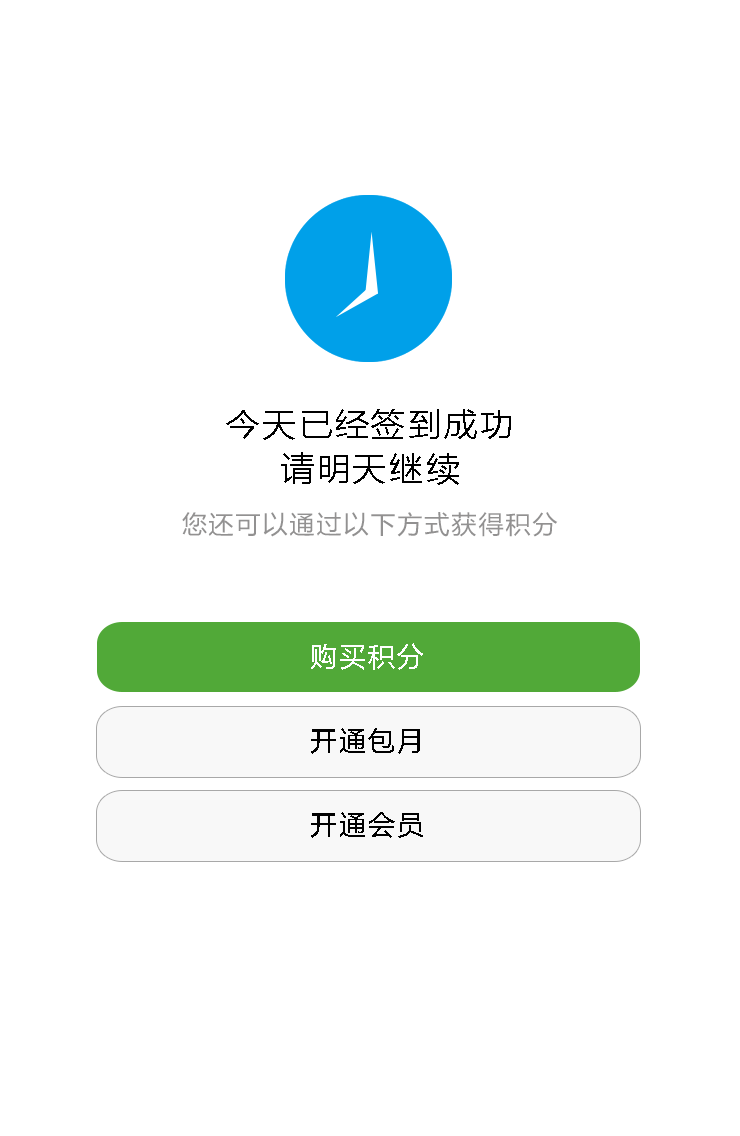
<style>
.page{position:relative;width:740px;height:1136px;background:#ffffff}
.page>*{position:absolute;margin:0}
.t1{font:33.5px/44.9px "MicrosoftYaHei";letter-spacing:0.08em;color:#000000}
.t2{font:25px "MicrosoftYaHei";letter-spacing:0.08em;color:#929191}
.t3{font:27.3px "MicrosoftYaHei";letter-spacing:0.08em;color:#ffffff}
.t4{font:27.3px "MicrosoftYaHei";letter-spacing:0.08em;color:#000000}
</style>
<div class="page">
<p class="t1" style="left:226px;top:409px;width:285px;height:76px;text-align:center">今天已经签到成功<br>请明天继续</p>
<p class="t2" style="left:182px;top:512px;width:376px;height:25px">您还可以通过以下方式获得积分</p>
<p class="t3" style="left:311px;top:643px;width:112px;height:27px">购买积分</p>
<p class="t4" style="left:311px;top:728px;width:109px;height:26px">开通包月</p>
<p class="t4" style="left:311px;top:812px;width:112px;height:26px">开通会员</p>
</div>
